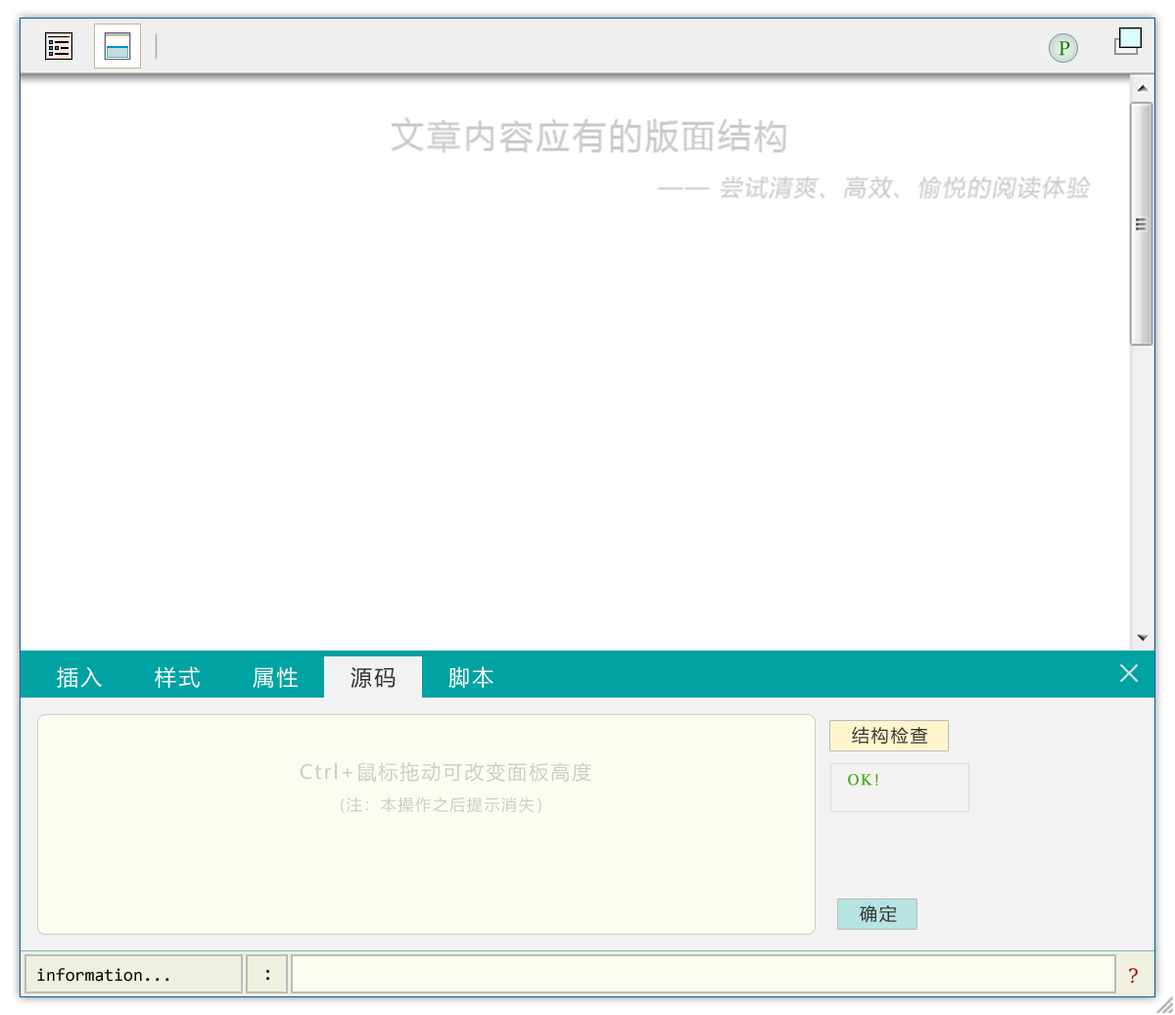
<style>
.page{position:relative;width:1175px;height:1015px;background:#ffffff}
.page>*{position:absolute;margin:0}
.t1{font:19.6px "Constantia";color:#1b7802}
.t2{font:21.5px "MicrosoftYaHei";letter-spacing:0.1em;color:#ffffff}
.t3{font:27.4px "NSimSun";letter-spacing:0.1em;color:#dddddd;font-weight:bold}
.t4{font:21.5px "MicrosoftYaHei";letter-spacing:0.1em;color:#333333}
.t5{font:17.6px "MicrosoftYaHei";letter-spacing:0.1em;color:#333333}
.t6{font:19.6px "MicrosoftYaHei";letter-spacing:0.1em;color:#cccccc}
.t7{font:15.7px "MicrosoftYaHei";letter-spacing:0.1em;color:#cccccc}
.t8{font:15.7px "TimesNewRomanPSMT";letter-spacing:0.1em;color:#52ae23;font-weight:bold}
.t9{font:17.6px "Consolas";color:#000000}
.t10{font:19.6px "Consolas";color:#000000}
.t11{font:19.6px "DejaVuSerif";color:#aa0000}
</style>
<div class="page">
<p class="t1" style="left:1060px;top:41px;width:10px;height:15px">P</p>
<p class="t2" style="left:57px;top:666px;width:45px;height:22px">插入</p>
<p class="t2" style="left:155px;top:666px;width:45px;height:22px">样式</p>
<p class="t2" style="left:449px;top:666px;width:45px;height:22px">脚本</p>
<p class="t3" style="left:1120px;top:664px;width:19px;height:18px">×</p>
<p class="t2" style="left:253px;top:667px;width:45px;height:21px">属性</p>
<p class="t4" style="left:351px;top:667px;width:45px;height:21px">源码</p>
<p class="t5" style="left:852px;top:726px;width:76px;height:18px">结构检查</p>
<p class="t6" style="left:300px;top:762px;width:292px;height:51px;text-align:center">Ctrl+鼠标拖动可改变面板高度<br><span class="t7">(注：本操作之后提示消失）</span></p>
<p class="t8" style="left:848px;top:774px;width:30px;height:11px">OK!</p>
<p class="t5" style="left:860px;top:905px;width:37px;height:18px">确定</p>
<p class="t9" style="left:37px;top:968px;width:132px;height:13px">information...</p>
<p class="t10" style="left:266px;top:970px;width:3px;height:10px">:</p>
<p class="t11" style="left:1129px;top:968px;width:9px;height:15px">?</p>
</div>
